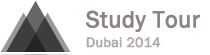
<style>
.page{position:relative;width:210px;height:55px;background:#ffffff}
.page>*{position:absolute;margin:0}
.t1{font:24px "FranklinGothic-Book";color:#8c8383;font-weight:bold}
.t2{font:14px "FranklinGothic-Book";color:#b2a7a7;font-weight:bold}
</style>
<div class="page">
<p class="t1" style="left:85px;top:10px;width:115px;height:22px">Study Tour</p>
<p class="t2" style="left:86px;top:37px;width:75px;height:11px">Dubai 2014</p>
</div>
